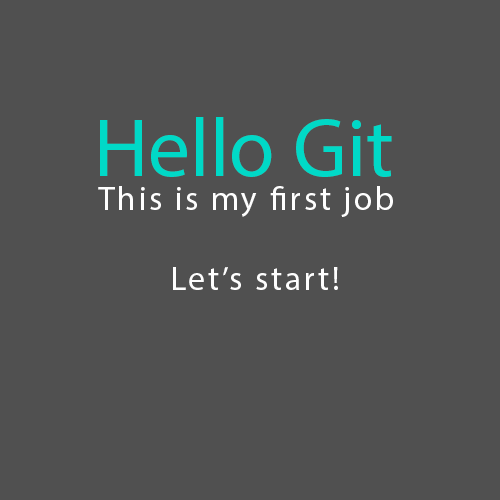
<style>
.page{position:relative;width:500px;height:500px;background:#505050}
.page>*{position:absolute;margin:0}
.t1{font:83.3px "MyriadPro-Regular";color:#00d9c7}
.t2{font:33.6px "MyriadPro-Regular";letter-spacing:0.08em;color:#fefefe}
</style>
<div class="page">
<p class="t1" style="left:100px;top:117px;width:292px;height:60px">Hello Git</p>
<p class="t2" style="left:98px;top:186px;width:295px;height:31px">This is my first job</p>
<p class="t2" style="left:173px;top:267px;width:165px;height:23px">Let’s start!</p>
</div>
